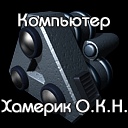
<style>
.page{position:relative;width:128px;height:128px;background:#000000}
.page>*{position:absolute;margin:0}
.t1{font:18px "BauhausC-Medium";color:#ffffff;font-weight:bold}
.t2{font:18px "BauhausC-Medium";letter-spacing:-0.025em;color:#ffffff;font-weight:bold}
</style>
<div class="page">
<p class="t1" style="left:18px;top:13px;width:92px;height:17px">Компьютер</p>
<p class="t2" style="left:1px;top:99px;width:126px;height:17px">Хамерик О<span class="t1">.К.Н.</span></p>
</div>
